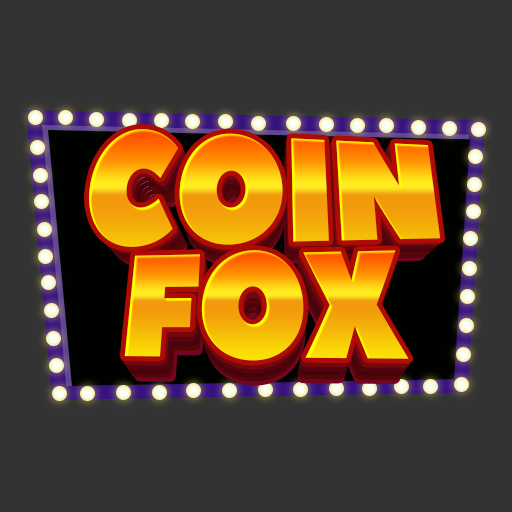
<style>
.page{position:relative;width:512px;height:512px;background:#333333}
.page>*{position:absolute;margin:0}
.t1{font:150.1px "PeaceSans";letter-spacing:-0.025em;scale:0.89 1}
.t2{font:147.1px "PeaceSans";letter-spacing:-0.025em;scale:0.89 1}
.t3{font:144.2px "PeaceSans";letter-spacing:-0.025em;scale:0.89 1}
.t4{font:141.3px "PeaceSans";letter-spacing:-0.025em;scale:0.89 1}
.t5{font:148.1px "PeaceSans";letter-spacing:-0.025em;scale:0.89 1}
.t6{font:145.1px "PeaceSans";letter-spacing:-0.025em;scale:0.89 1}
.t7{font:142.2px "PeaceSans";letter-spacing:-0.025em;scale:0.89 1}
.t8{font:139.3px "PeaceSans";letter-spacing:-0.025em;scale:0.89 1}
</style>
<div class="page">
<p class="t1" style="left:89px;top:129px;width:352px;height:118px">COIN</p>
<p class="t2" style="left:92px;top:133px;width:345px;height:116px">COIN</p>
<p class="t3" style="left:95px;top:138px;width:339px;height:114px">COIN</p>
<p class="t4" style="left:99px;top:143px;width:331px;height:112px">COIN</p>
<p class="t5" style="left:124px;top:250px;width:285px;height:111px">FOX</p>
<p class="t6" style="left:127px;top:256px;width:279px;height:109px">FOX</p>
<p class="t7" style="left:130px;top:262px;width:273px;height:107px">FOX</p>
<p class="t8" style="left:132px;top:268px;width:268px;height:105px">FOX</p>
</div>
